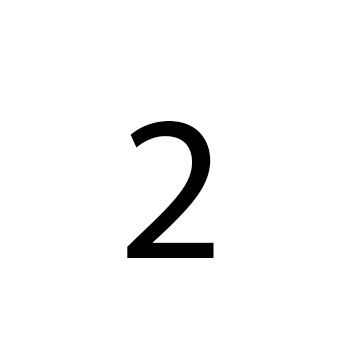
<style>
.page{position:relative;width:354px;height:354px;background:#ffffff}
.page>*{position:absolute;margin:0}
.t1{font:208.3px "MyriadPro-Regular";color:#000000}
</style>
<div class="page">
<p class="t1" style="left:127px;top:120px;width:87px;height:138px">2</p>
</div>
